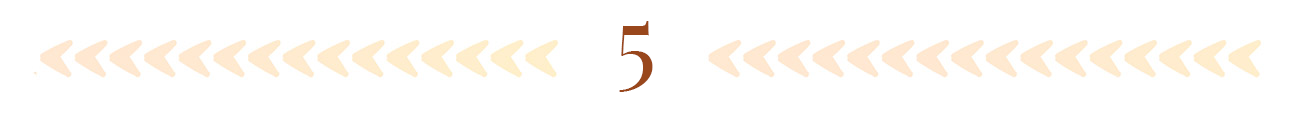
<style>
.page{position:relative;width:1300px;height:115px;background:#ffffff}
.page>*{position:absolute;margin:0}
.t1{font:100px "PlayfairDisplay-Regular";color:#99471c}
</style>
<div class="page">
<p class="t1" style="left:619px;top:21px;width:34px;height:71px">5</p>
</div>
